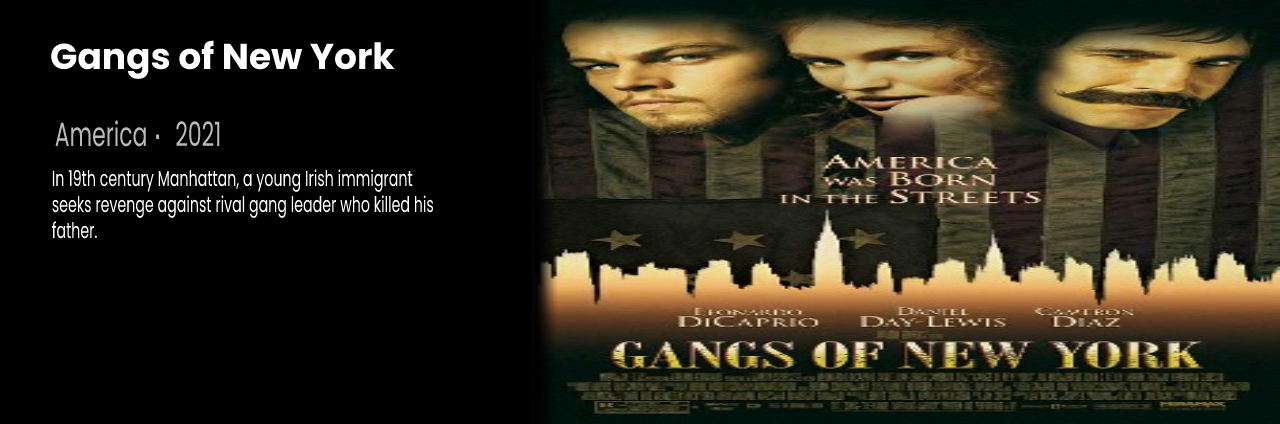
<style>
.page{position:relative;width:1280px;height:424px;background:#000000}
.page>*{position:absolute;margin:0}
.t1{font:36px "Poppins-Bold";color:#ffffff}
.t2{font:33.6px "Poppins-Regular";color:#bababa;scale:0.65 1}
.t3{font:35.7px "DejaVuSans";color:#bababa;scale:0.77 1}
.t4{font:21.8px "Poppins-Regular";color:#ffffff;scale:0.65 1}
</style>
<div class="page">
<p class="t1" style="left:51px;top:40px;width:344px;height:39px">Gangs of New York</p>
<p class="t2" style="left:55px;top:120px;width:165px;height:27px">America   2021</p>
<p class="t3" style="left:156px;top:134px;width:3px;height:5px">.</p>
<p class="t4" style="left:52px;top:169px;width:382px;height:70px">In 19th century Manhattan, a young Irish immigrant seeks revenge against rival gang leader who killed his father.</p>
</div>
